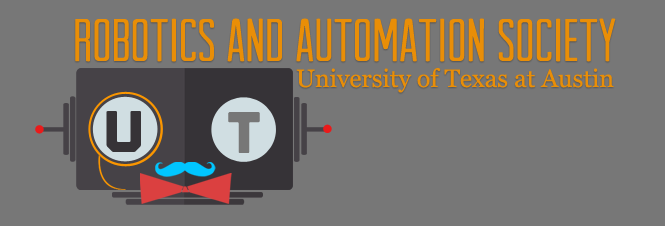
<style>
.page{position:relative;width:665px;height:226px;background:#777777}
.page>*{position:absolute;margin:0}
.t1{font:60.4px "ArvilSans";color:#e98e07}
.t2{font:25px "Georgia";color:#e98e07}
.t3{font:58.3px "Outage-Cut";color:#363337}
.t4{font:58.3px "Outage-Cut";color:#777777}
</style>
<div class="page">
<p class="t1" style="left:75px;top:18px;width:541px;height:44px">Robotics and Automation SOCIETY</p>
<p class="t2" style="left:296px;top:68px;width:318px;height:25px">University of Texas at Austin</p>
<p class="t3" style="left:106px;top:111px;width:35px;height:41px">U</p>
<p class="t4" style="left:228px;top:112px;width:32px;height:41px">T</p>
</div>
